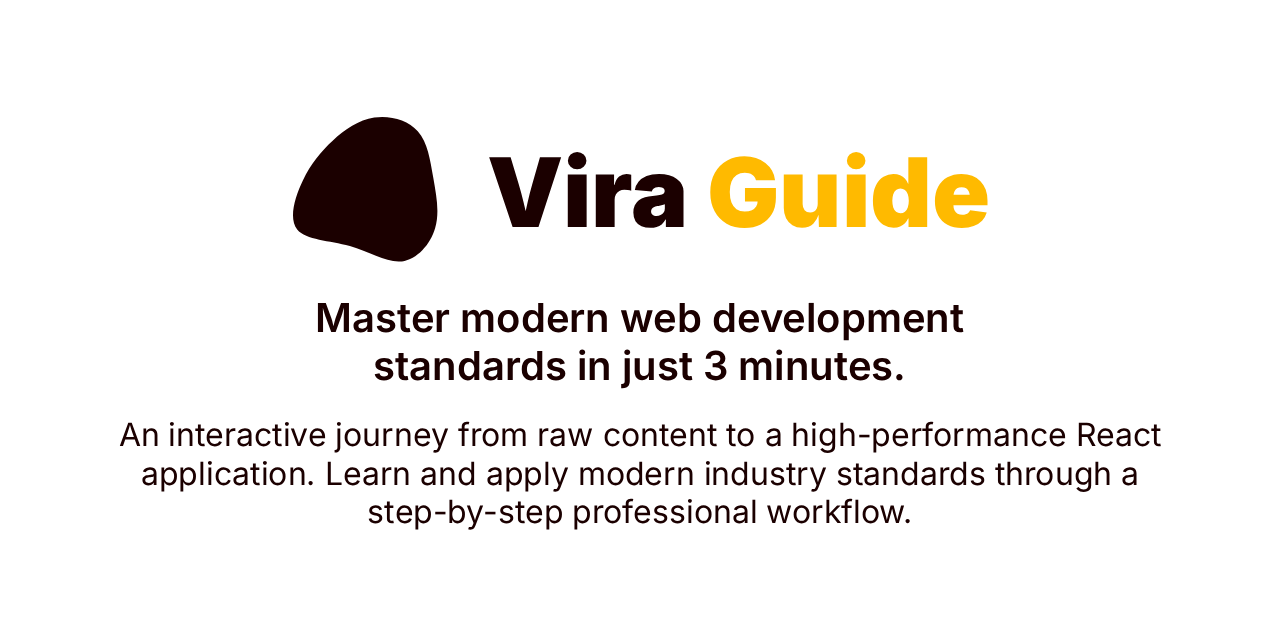
<style>
.page{position:relative;width:1280px;height:640px;background:#ffffff}
.page>*{position:absolute;margin:0}
.t1{font:96px "Inter-Black";color:#ffba00}
.t2{font:96px "Inter-Black";color:#1b0000}
.t3{font:40px "Inter-SemiBold";color:#1b0000}
.t4{font:32px "Inter-Regular";color:#1b0000}
</style>
<div class="page">
<p class="t1" style="left:489px;top:152px;width:499px;height:76px"><span class="t2">Vira </span>Guide</p>
<p class="t3" style="left:317px;top:302px;width:647px;height:87px;text-align:center">Master modern web development standards in just 3 minutes.</p>
<p class="t4" style="left:119px;top:421px;width:1042px;height:109px;text-align:center">An interactive journey from raw content to a high-performance React application. Learn and apply modern industry standards through a step-by-step professional workflow.</p>
</div>
